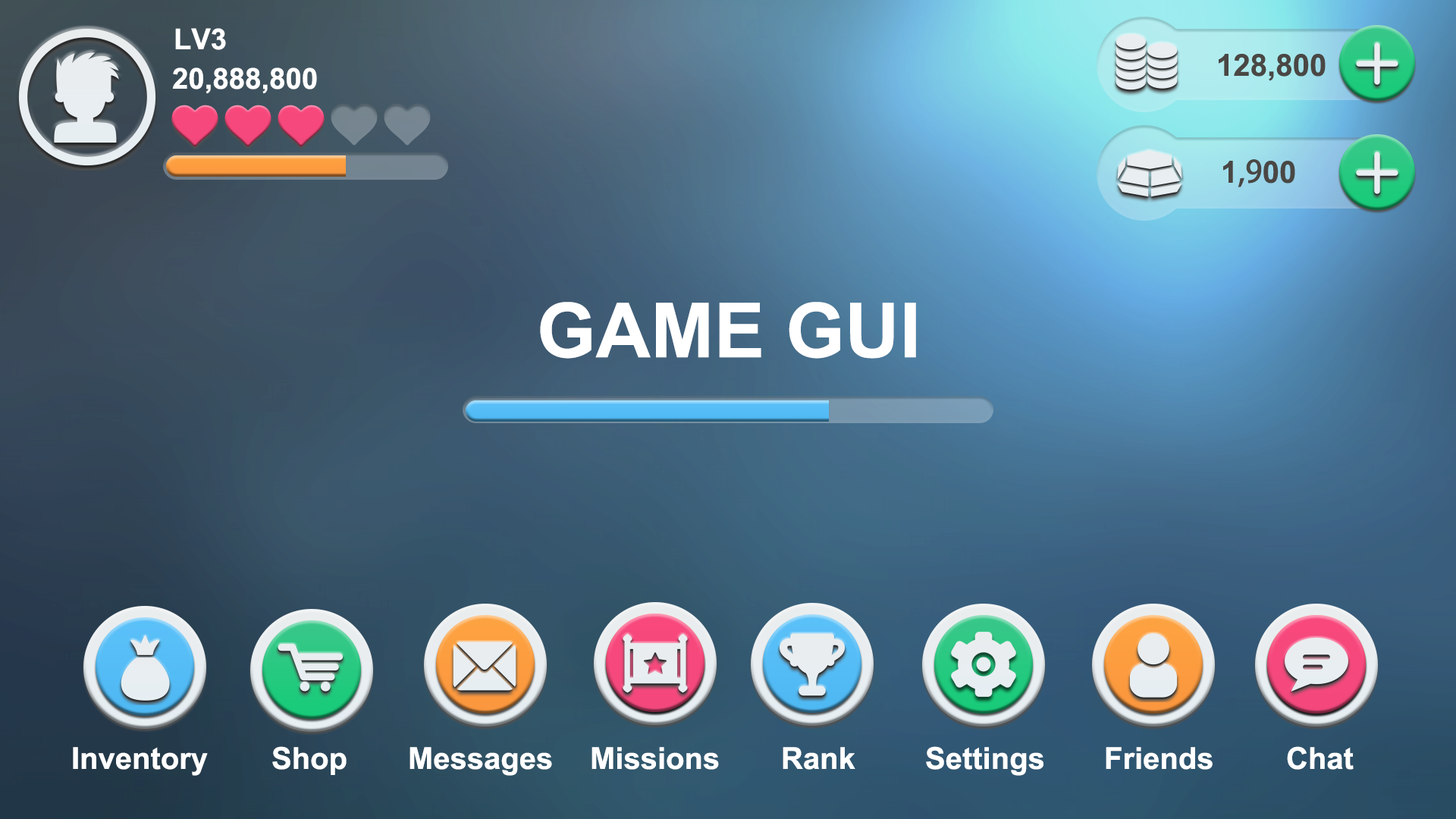
<style>
.page{position:relative;width:1456px;height:819px}
.page>*{position:absolute;margin:0}
.t1{font:28.9px "Arial-BoldMT";color:#ffffff}
.t2{font:30.5px "Arial-BoldMT";color:#4a4744}
.t3{font:29px "Arial-BoldMT";color:#ffffff}
.t4{font:30.5px "AdobeHeitiStd-Regular";color:#4a4744}
.t5{font:75.8px "Arial-BoldMT";color:#ffffff}
.t6{font:30.3px "Arial-BoldMT";color:#ffffff}
</style>
<div class="page">
<p class="t1" style="left:175px;top:28px;width:51px;height:22px">LV3</p>
<p class="t2" style="left:1219px;top:54px;width:107px;height:27px">128,800</p>
<p class="t3" style="left:172px;top:67px;width:145px;height:27px">20,888,800</p>
<p class="t4" style="left:1223px;top:159px;width:72px;height:28px"><span class="t2">1</span>,9<span class="t2">00</span></p>
<p class="t5" style="left:540px;top:302px;width:376px;height:57px">GAME GUI</p>
<p class="t6" style="left:73px;top:747px;width:135px;height:29px">Inventory</p>
<p class="t6" style="left:272px;top:746px;width:75px;height:29px">Shop</p>
<p class="t6" style="left:409px;top:747px;width:143px;height:29px">Messages</p>
<p class="t6" style="left:591px;top:747px;width:128px;height:23px">Missions</p>
<p class="t6" style="left:783px;top:747px;width:72px;height:23px">Rank</p>
<p class="t6" style="left:926px;top:746px;width:117px;height:30px">Settings</p>
<p class="t6" style="left:1106px;top:747px;width:107px;height:23px">Friends</p>
<p class="t6" style="left:1287px;top:746px;width:67px;height:24px">Chat</p>
</div>
